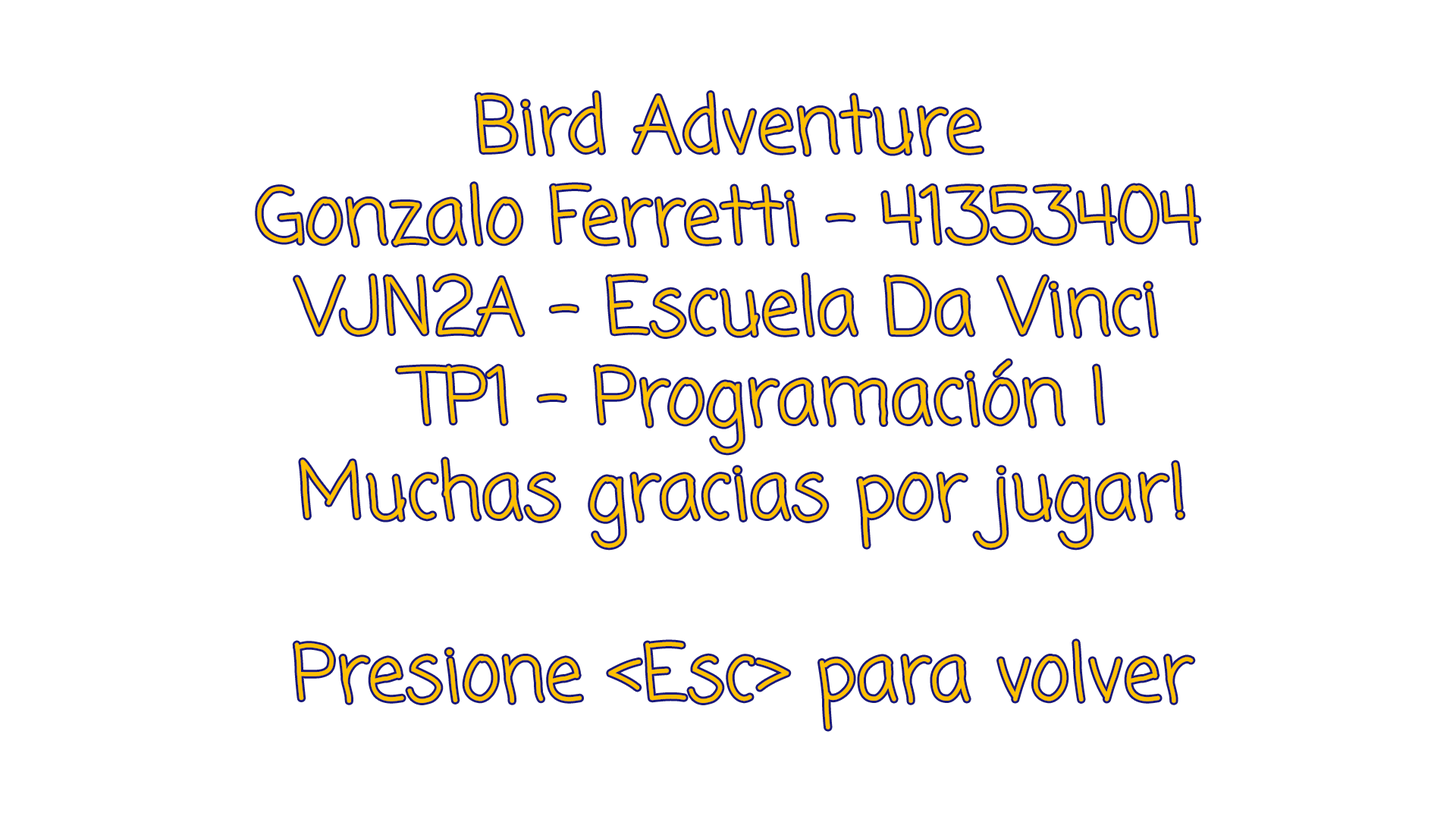
<style>
.page{position:relative;width:1456px;height:819px;background:#ffffff}
.page>*{position:absolute;margin:0}
.t1{font:75.8px "ComingSoon-Regular";color:#ffc000}
</style>
<div class="page">
<p class="t1" style="left:257px;top:93px;width:943px;height:244px;text-align:center">Bird Adventure<br>Gonzalo Ferretti - 41353404<br>VJN2A - Escuela Da Vinci</p>
<p class="t1" style="left:397px;top:360px;width:706px;height:93px">TP1 - Programación I</p>
<p class="t1" style="left:294px;top:459px;width:900px;height:271px;text-align:center">Muchas gracias por jugar!<br><br>Presione &lt;Esc&gt; para volver</p>
</div>
